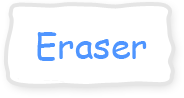
<style>
.page{position:relative;width:184px;height:98px;background:#ffffff}
.page>*{position:absolute;margin:0}
.t1{font:36px "ComicSansMS";color:#4f95ff}
</style>
<div class="page">
<p class="t1" style="left:37px;top:32px;width:110px;height:29px">Eraser</p>
</div>
